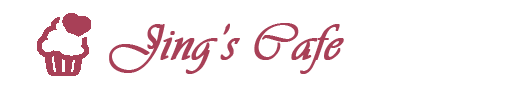
<style>
.page{position:relative;width:517px;height:86px;background:#ffffff}
.page>*{position:absolute;margin:0}
.t1{font:52px "Vivaldii";color:#a84057;font-weight:bold}
</style>
<div class="page">
<p class="t1" style="left:109px;top:23px;width:235px;height:51px">Jing’s Cafe</p>
</div>
